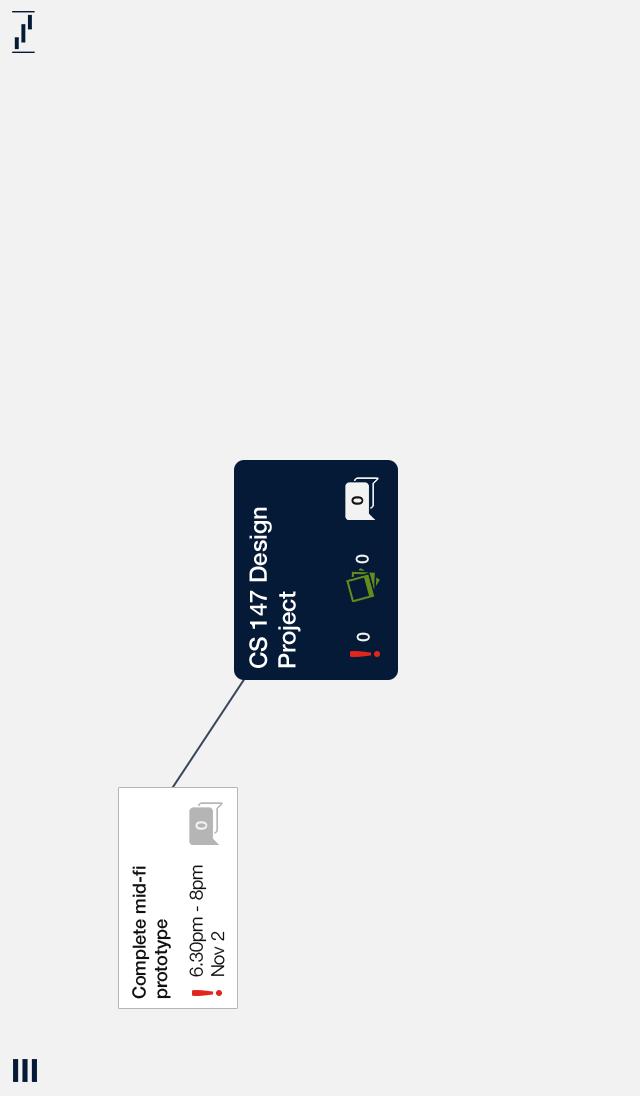
<style>
.page{position:relative;width:640px;height:1096px;background:#f2f2f2}
.page>*{position:absolute;margin:0}
.t1{font:16px "HelveticaNeue-Bold";color:#111111}
.t2{font:24px "HelveticaNeue-Medium";color:#ffffff}
.t3{font:18px "HelveticaNeue-Medium";color:#f2f2f2}
.t4{font:16px "HelveticaNeue-Bold";color:#f2f2f2}
.t5{font:18px "HelveticaNeue-Medium";color:#111111}
.t6{font:18px "HelveticaNeue-Light";color:#111111}
</style>
<div class="page">
<p class="t1" style="left:351px;top:496px;width:13px;height:9px;rotate:-90deg">0</p>
<p class="t2" style="left:249px;top:507px;width:52px;height:161px;rotate:-90deg">CS 147 Design Project</p>
<p class="t3" style="left:355px;top:554px;width:14px;height:10px;rotate:-90deg">0</p>
<p class="t3" style="left:356px;top:632px;width:14px;height:10px;rotate:-90deg">0</p>
<p class="t4" style="left:195px;top:821px;width:13px;height:9px;rotate:-90deg">0</p>
<p class="t5" style="left:132px;top:866px;width:39px;height:133px;rotate:-90deg">Complete mid-fi prototype</p>
<p class="t6" style="left:189px;top:865px;width:36px;height:112px;rotate:-90deg">6.30pm - 8pm Nov 2</p>
</div>
